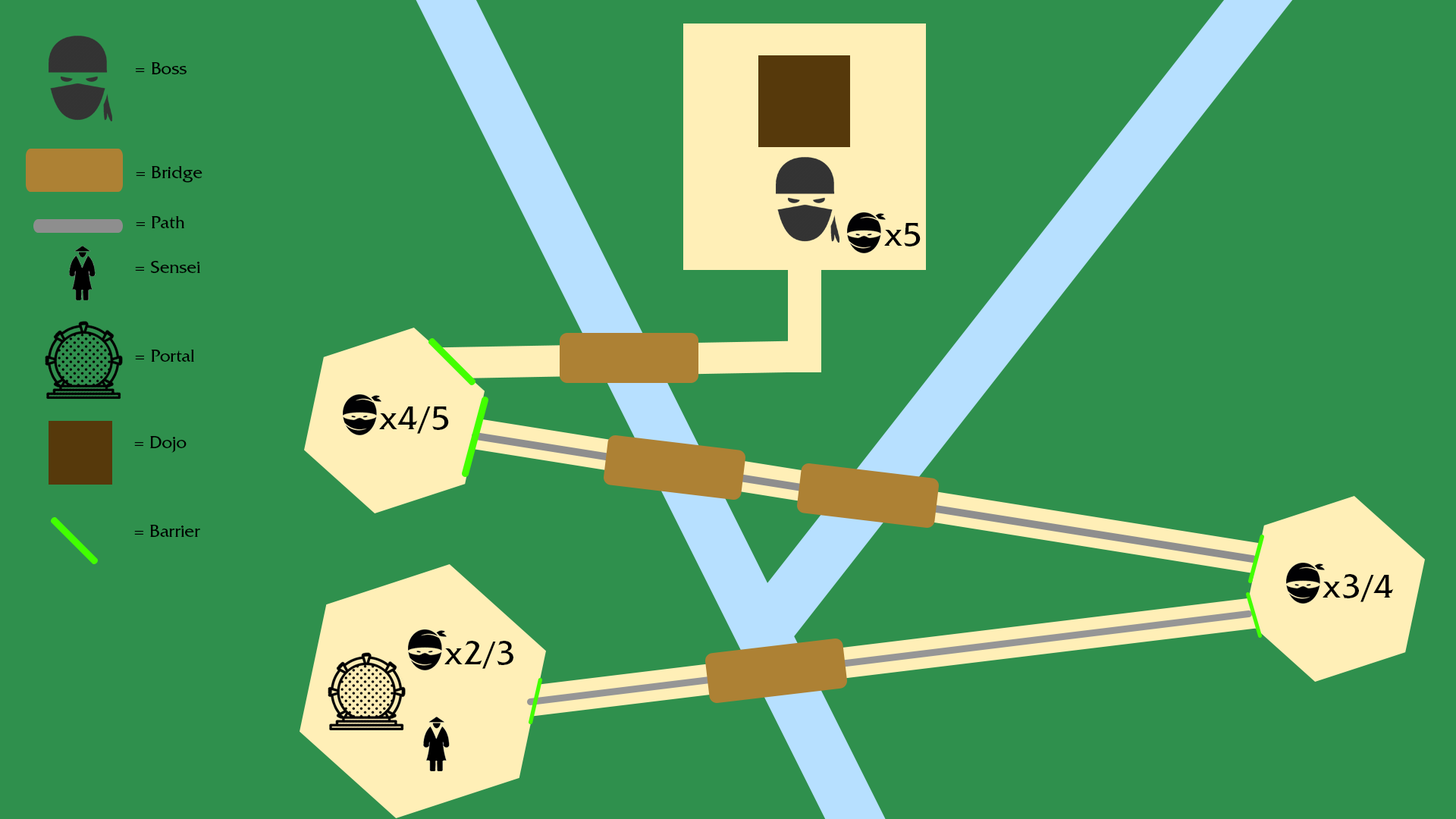
<style>
.page{position:relative;width:1456px;height:819px;background:#2f904d}
.page>*{position:absolute;margin:0}
.t1{font:18.2px "FrizQuadrataStd";color:#000000}
.t2{font:34.1px "FrizQuadrataStd";color:#000000}
</style>
<div class="page">
<p class="t1" style="left:136px;top:62px;width:51px;height:12px">= Boss</p>
<p class="t1" style="left:136px;top:166px;width:66px;height:17px">= Bridge</p>
<p class="t1" style="left:136px;top:216px;width:49px;height:12px">= Path</p>
<p class="t2" style="left:884px;top:223px;width:37px;height:23px">x5</p>
<p class="t1" style="left:135px;top:261px;width:65px;height:12px">= Sensei</p>
<p class="t1" style="left:135px;top:350px;width:59px;height:12px">= Portal</p>
<p class="t2" style="left:379px;top:406px;width:70px;height:28px">x4/5</p>
<p class="t1" style="left:134px;top:436px;width:53px;height:17px">= Dojo</p>
<p class="t1" style="left:134px;top:525px;width:66px;height:12px">= Barrier</p>
<p class="t2" style="left:1323px;top:574px;width:71px;height:28px">x3/4</p>
<p class="t2" style="left:444px;top:641px;width:69px;height:28px">x2/3</p>
</div>
